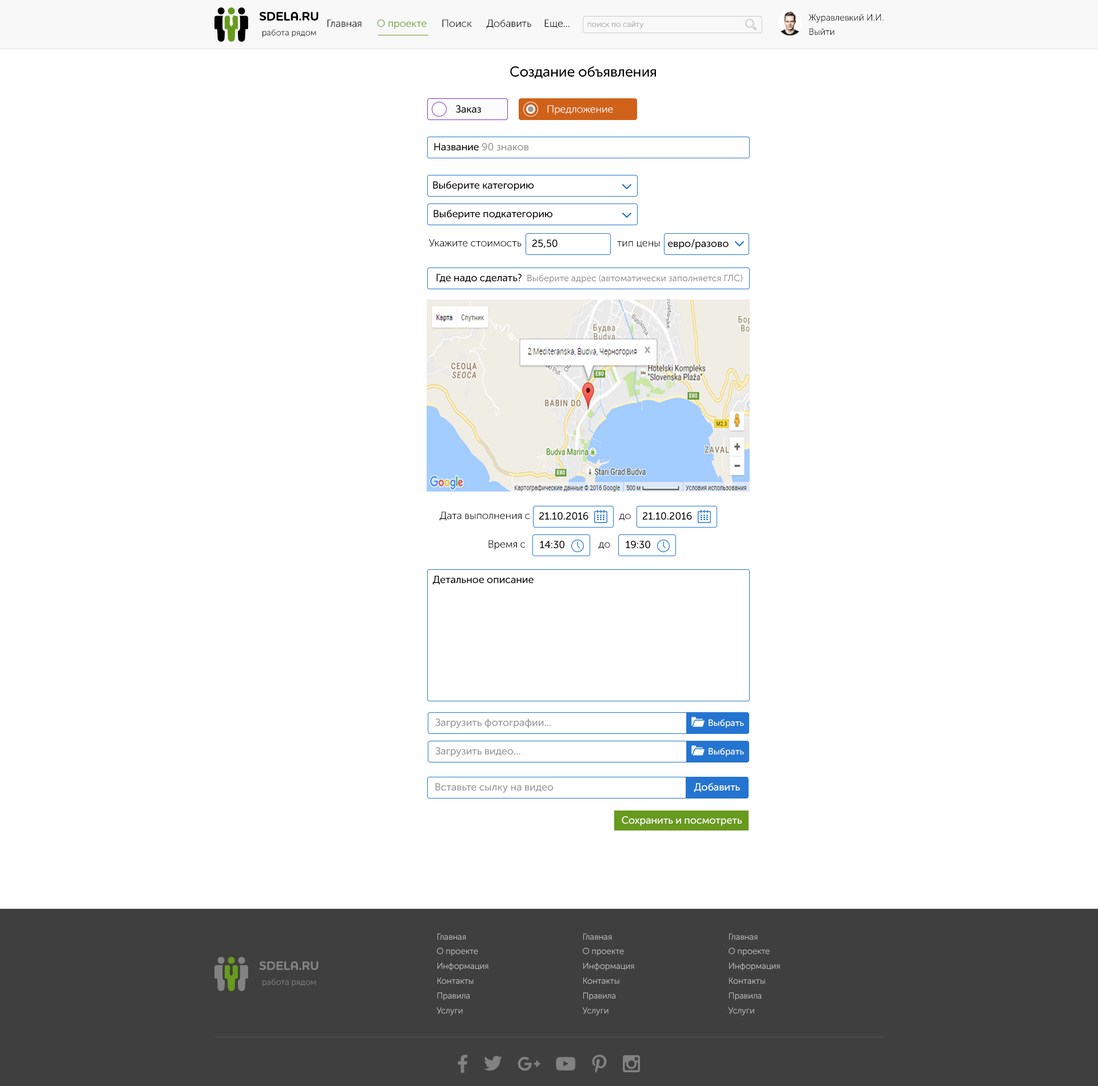
<style>
.page{position:relative;width:1098px;height:1086px;background:#ffffff}
.page>*{position:absolute;margin:0}
.t1{font:12.6px "HouschkaRounded-Bold";letter-spacing:-0.01em;color:#000000}
.t2{font:9.1px "MuseoSansCyrl-300";letter-spacing:-0.01em;color:#000000}
.t3{font:8.6px "MuseoSansCyrl-300";letter-spacing:-0.01em;color:#000000}
.t4{font:10.3px "MuseoSansCyrl-300";letter-spacing:-0.01em;color:#000000}
.t5{font:10.3px "MuseoSansCyrl-300";letter-spacing:-0.01em;color:#689a1e}
.t6{font:8px "MuseoSansCyrl-300";letter-spacing:-0.01em;color:#999999}
.t7{font:9.2px "MuseoSansCyrl-300";letter-spacing:-0.01em;color:#000000}
.t8{font:14.3px "MuseoSansCyrl-500";letter-spacing:-0.01em;color:#000000}
.t9{font:10.3px "MuseoSansCyrl-500";letter-spacing:-0.01em;color:#000000}
.t10{font:10.3px "MuseoSansCyrl-300";letter-spacing:-0.01em;color:#fcfcfc}
.t11{font:10.3px "MuseoSansCyrl-500";letter-spacing:-0.01em;color:#999999}
.t12{font:9.1px "MuseoSansCyrl-500";letter-spacing:-0.01em;color:#999999}
.t13{font:9.1px "MuseoSansCyrl-500";letter-spacing:-0.01em;color:#ffffff}
.t14{font:10.3px "MuseoSansCyrl-500";letter-spacing:-0.01em;color:#ffffff}
.t15{font:8.6px/14.9px "MuseoSansCyrl-300";letter-spacing:-0.01em;color:#c4c4c4}
.t16{font:12.6px "HouschkaRounded-Bold";letter-spacing:-0.01em;color:#828282}
.t17{font:8.6px "MuseoSansCyrl-300";letter-spacing:-0.01em;color:#828282}
</style>
<div class="page">
<p class="t1" style="left:260px;top:11px;width:58px;height:10px">SDELA.RU</p>
<p class="t2" style="left:808px;top:14px;width:75px;height:9px">Журавлевкий И.И.</p>
<p class="t3" style="left:262px;top:29px;width:54px;height:8px">работа рядом</p>
<p class="t4" style="left:327px;top:19px;width:242px;height:10px">Главная      <span class="t5">О проекте</span>      Поиск      Добавить     Еще...</p>
<p class="t6" style="left:587px;top:21px;width:57px;height:8px">поиск по сайту</p>
<p class="t7" style="left:809px;top:28px;width:25px;height:7px">Выйти</p>
<p class="t8" style="left:510px;top:66px;width:146px;height:12px">Создание объявления</p>
<p class="t9" style="left:456px;top:105px;width:25px;height:8px">Заказ</p>
<p class="t10" style="left:547px;top:105px;width:66px;height:10px">Предложение</p>
<p class="t11" style="left:434px;top:143px;width:95px;height:8px"><span class="t9">Название </span>90 знаков</p>
<p class="t9" style="left:433px;top:181px;width:101px;height:10px">Выберите категорию</p>
<p class="t9" style="left:433px;top:209px;width:119px;height:11px">Выберите подкатегорию</p>
<p class="t4" style="left:429px;top:239px;width:92px;height:8px">Укажите стоимость</p>
<p class="t9" style="left:532px;top:240px;width:25px;height:8px">25,50</p>
<p class="t4" style="left:617px;top:241px;width:43px;height:7px">тип цены</p>
<p class="t9" style="left:668px;top:239px;width:60px;height:10px">евро/разово</p>
<p class="t12" style="left:436px;top:274px;width:306px;height:10px"><span class="t9">Где надо сделать?  </span>Выберите адрес (автоматически заполняется ГЛС)</p>
<p class="t4" style="left:439px;top:512px;width:91px;height:9px">Дата выполнения с</p>
<p class="t9" style="left:539px;top:512px;width:49px;height:8px">21.10.2016</p>
<p class="t4" style="left:619px;top:513px;width:12px;height:8px">до</p>
<p class="t9" style="left:643px;top:512px;width:49px;height:8px">21.10.2016</p>
<p class="t4" style="left:488px;top:540px;width:37px;height:10px">Время с</p>
<p class="t9" style="left:540px;top:541px;width:24px;height:8px">14:30</p>
<p class="t4" style="left:598px;top:542px;width:12px;height:7px">до</p>
<p class="t9" style="left:625px;top:541px;width:25px;height:8px">19:30</p>
<p class="t9" style="left:432px;top:576px;width:101px;height:9px">Детальное описание</p>
<p class="t11" style="left:435px;top:719px;width:116px;height:9px">Загрузить фотографии...</p>
<p class="t13" style="left:708px;top:719px;width:36px;height:9px">Выбрать</p>
<p class="t11" style="left:435px;top:747px;width:85px;height:10px">Загрузить видео...</p>
<p class="t13" style="left:708px;top:748px;width:36px;height:9px">Выбрать</p>
<p class="t11" style="left:435px;top:783px;width:118px;height:10px">Вставьте сылку на видео</p>
<p class="t14" style="left:694px;top:783px;width:46px;height:9px">Добавить</p>
<p class="t14" style="left:621px;top:816px;width:121px;height:10px">Сохранить и посмотреть</p>
<p class="t15" style="left:436px;top:934px;width:52px;height:82px">Главная<br>О проекте<br>Информация<br>Контакты<br>Правила<br>Услуги</p>
<p class="t15" style="left:582px;top:934px;width:52px;height:82px">Главная<br>О проекте<br>Информация<br>Контакты<br>Правила<br>Услуги</p>
<p class="t15" style="left:728px;top:934px;width:52px;height:82px">Главная<br>О проекте<br>Информация<br>Контакты<br>Правила<br>Услуги</p>
<p class="t16" style="left:260px;top:961px;width:58px;height:9px">SDELA.RU</p>
<p class="t17" style="left:262px;top:979px;width:54px;height:8px">работа рядом</p>
</div>
